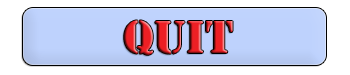
<style>
.page{position:relative;width:350px;height:75px;background:#ffffff}
.page>*{position:absolute;margin:0}
.t1{font:48px "Stencil"}
</style>
<div class="page">
<p class="t1" style="left:124px;top:20px;width:109px;height:35px">Quit</p>
</div>
